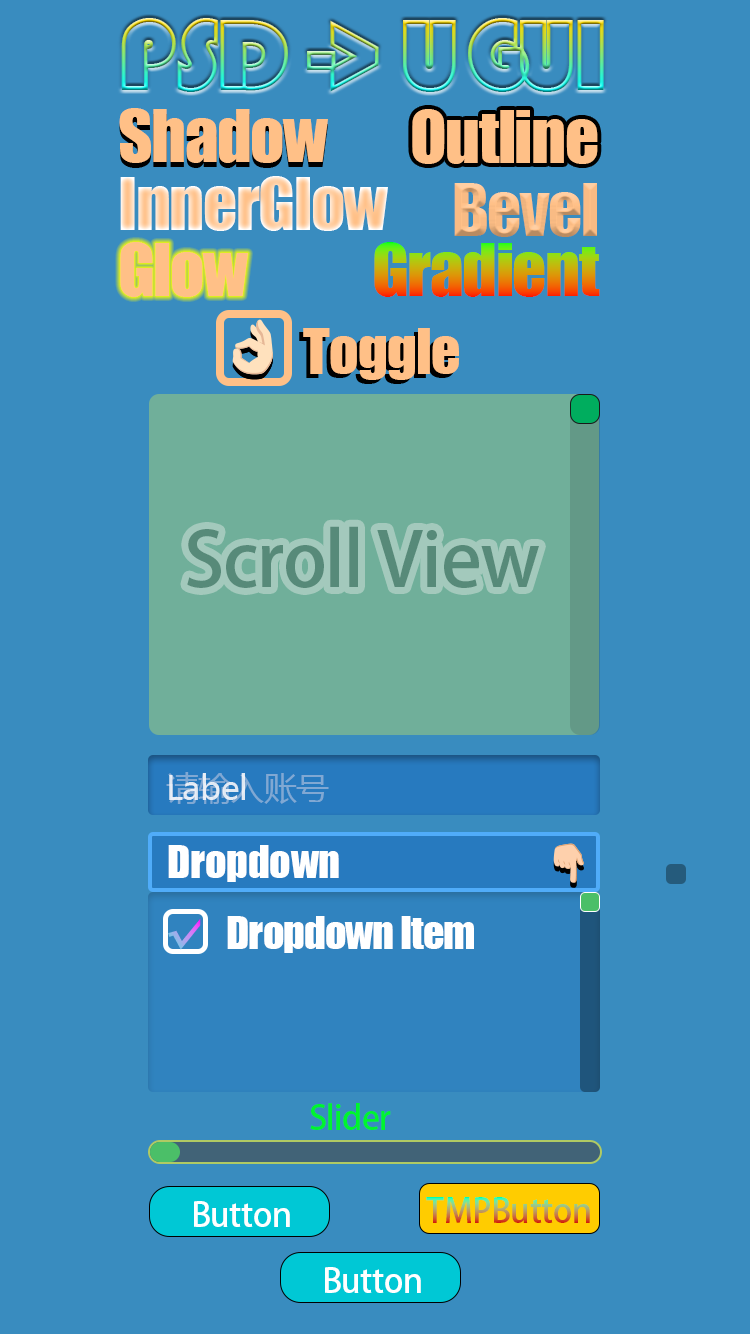
<style>
.page{position:relative;width:750px;height:1334px;background:#398cbf}
.page>*{position:absolute;margin:0}
.t1{font:66.7px "Impact";letter-spacing:-0.02em;color:#ffc087}
.t2{font:66.7px "Impact";letter-spacing:-0.02em}
.t3{font:58.3px "Impact";letter-spacing:-0.02em;color:#ffc087}
.t4{font:75px "AdobeHeitiStd-Regular";letter-spacing:-0.02em;color:#578a79}
.t5{font:33.3px "MicrosoftYaHeiUI";letter-spacing:-0.02em;color:#80a8d3}
.t6{font:33.3px "MicrosoftYaHeiUI";letter-spacing:-0.02em;color:#e3ebf4}
.t7{font:41.7px "Impact";color:#ffffff}
.t8{font:41.7px "Impact";letter-spacing:-0.02em;color:#ffffff}
.t9{font:33.3px "AdobeHeitiStd-Regular";letter-spacing:-0.02em;color:#00f42e}
.t10{font:33.3px "AdobeHeitiStd-Regular";letter-spacing:-0.02em;color:#ffffff}
.t11{font:33.3px "AdobeHeitiStd-Regular";letter-spacing:-0.02em}
</style>
<div class="page">
<p class="t1" style="left:119px;top:108px;width:209px;height:55px">Shadow</p>
<p class="t1" style="left:412px;top:109px;width:186px;height:55px">Outline</p>
<p class="t2" style="left:120px;top:176px;width:268px;height:55px">InnerGlow</p>
<p class="t1" style="left:454px;top:183px;width:143px;height:54px">Bevel</p>
<p class="t1" style="left:120px;top:242px;width:128px;height:55px">Glow</p>
<p class="t2" style="left:374px;top:242px;width:226px;height:55px">Gradient</p>
<p class="t3" style="left:303px;top:328px;width:156px;height:52px">Toggle</p>
<p class="t4" style="left:187px;top:526px;width:352px;height:62px">Scroll View</p>
<p class="t5" style="left:166px;top:772px;width:163px;height:32px">请输入账号</p>
<p class="t6" style="left:169px;top:773px;width:76px;height:27px">Label</p>
<p class="t7" style="left:168px;top:845px;width:171px;height:37px">Dropdown</p>
<p class="t8" style="left:227px;top:916px;width:247px;height:37px">Dropdown Item</p>
<p class="t9" style="left:310px;top:1103px;width:81px;height:27px">Slider</p>
<p class="t10" style="left:194px;top:1201px;width:96px;height:26px">Button</p>
<p class="t11" style="left:426px;top:1197px;width:164px;height:26px">TMPButton</p>
<p class="t10" style="left:325px;top:1267px;width:96px;height:26px">Button</p>
</div>
